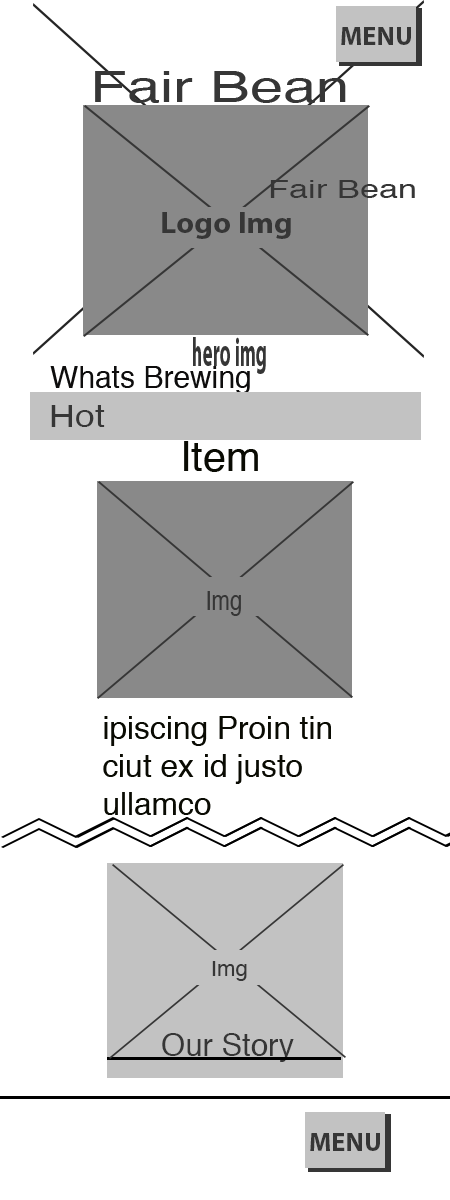
<style>
.page{position:relative;width:450px;height:1200px;background:#ffffff}
.page>*{position:absolute;margin:0}
.t1{font:26.7px "MyriadPro-Bold";color:#363636}
.t2{font:42.6px "Helvetica";color:#363636;scale:1.4 1}
.t3{font:24.3px "Helvetica";color:#363636;scale:1.41 1}
.t4{font:30px "MyriadPro-Bold";color:#363636;scale:1.06 1}
.t5{font:40.5px "MyriadPro-Bold";color:#363636;scale:0.47 1}
.t6{font:34.7px "MyriadPro-Bold";color:#363636;scale:0.47 1}
.t7{font:30px "Helvetica";color:#0e0d0d}
.t8{font:30.7px "Helvetica";color:#363636;scale:1.16 1}
.t9{font:41.3px "Helvetica";color:#0a0b03}
.t10{font:26.7px "Helvetica";color:#363636;scale:0.82 1}
.t11{font:45.7px "MyriadPro-Bold";color:#363636;scale:0.82 1}
.t12{font:31.7px "Helvetica";color:#0a0b03}
.t13{font:21.5px "Helvetica";color:#363636}
.t14{font:40px "MyriadPro-Bold";color:#363636}
.t15{font:31.5px "Helvetica";color:#363636}
</style>
<div class="page">
<p class="t1" style="left:341px;top:27px;width:70px;height:18px">MENU</p>
<p class="t2" style="left:95px;top:71px;width:251px;height:32px">Fair Bean</p>
<p class="t3" style="left:270px;top:180px;width:145px;height:18px">Fair Bean</p>
<p class="t4" style="left:162px;top:212px;width:129px;height:27px">Logo Img</p>
<p class="t5" style="left:193px;top:337px;width:73px;height:37px"><span class="t6">    </span>  hero img</p>
<p class="t7" style="left:50px;top:366px;width:200px;height:28px">Whats Brewing</p>
<p class="t8" style="left:51px;top:405px;width:54px;height:22px">Hot</p>
<p class="t9" style="left:184px;top:441px;width:74px;height:31px">Item</p>
<p class="t10" style="left:207px;top:591px;width:34px;height:25px"><span class="t11">   </span>Img</p>
<p class="t12" style="left:103px;top:716px;width:228px;height:99px">ipiscing Proin tin <br>ciut ex id justo <br>ullamco</p>
<p class="t13" style="left:212px;top:961px;width:35px;height:20px"><span class="t14">   </span>Img</p>
<p class="t15" style="left:162px;top:1033px;width:132px;height:29px">Our Story</p>
<p class="t1" style="left:310px;top:1133px;width:70px;height:18px">MENU</p>
</div>
